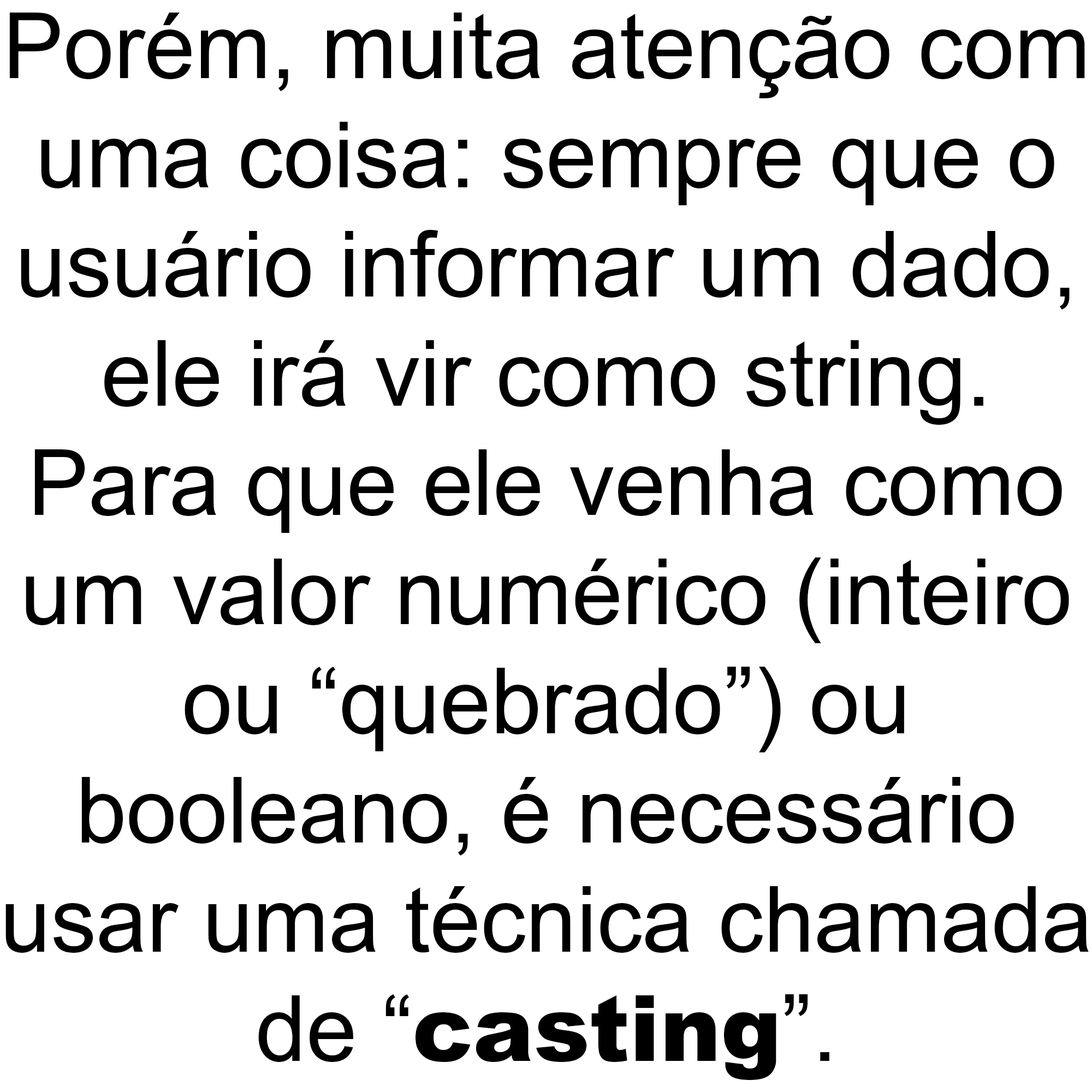
<style>
.page{position:relative;width:1092px;height:1092px;background:#ffffff}
.page>*{position:absolute;margin:0}
.t1{font:91px "ArialMT";color:#000000}
.t2{font:91px "Arial-Black";color:#000000}
</style>
<div class="page">
<p class="t1" style="left:5px;top:13px;width:1084px;height:1067px;text-align:center">Porém, muita atenção com<br>uma coisa: sempre que o<br>usuário informar um dado,<br>ele irá vir como string.<br>Para que ele venha como<br>um valor numérico (inteiro<br>ou “quebrado”) ou<br>booleano, é necessário<br>usar uma técnica chamada<br>de “<span class="t2">casting</span>”.</p>
</div>
